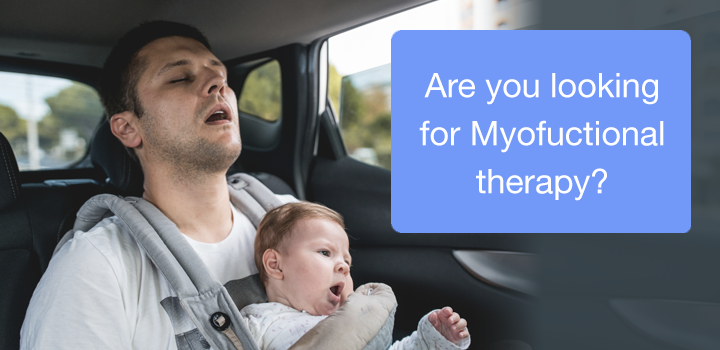
<style>
.page{position:relative;width:720px;height:350px;background:#7299f8}
.page>*{position:absolute;margin:0}
.t1{font:34px/48px "HelveticaNeue";color:#ffffff}
</style>
<div class="page">
<p class="t1" style="left:419px;top:73px;width:245px;height:128px;text-align:center">Are you looking for Myofuctional therapy?</p>
</div>
